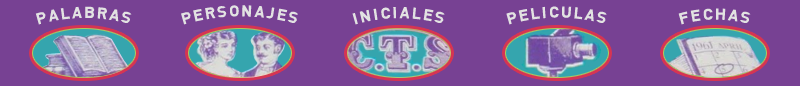
<style>
.page{position:relative;width:800px;height:86px;background:#774193}
.page>*{position:absolute;margin:0}
.t1{font:15px "Dinbold-Plain";letter-spacing:0.14em;color:#e2e2e2}
</style>
<div class="page">
<p class="t1" style="left:35px;top:6px;width:97px;height:19px">PALABRAS</p>
<p class="t1" style="left:181px;top:5px;width:117px;height:20px">PERSONAJES</p>
<p class="t1" style="left:506px;top:6px;width:101px;height:19px">PELICULAS</p>
<p class="t1" style="left:352px;top:7px;width:93px;height:18px">INICIALES</p>
<p class="t1" style="left:678px;top:8px;width:73px;height:17px">FECHAS</p>
</div>
